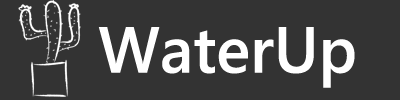
<style>
.page{position:relative;width:400px;height:100px;background:#333333}
.page>*{position:absolute;margin:0}
.t1{font:64.9px "SegoeWP-Semibold";color:#ffffff}
</style>
<div class="page">
<p class="t1" style="left:98px;top:27px;width:257px;height:61px">WaterUp</p>
</div>
